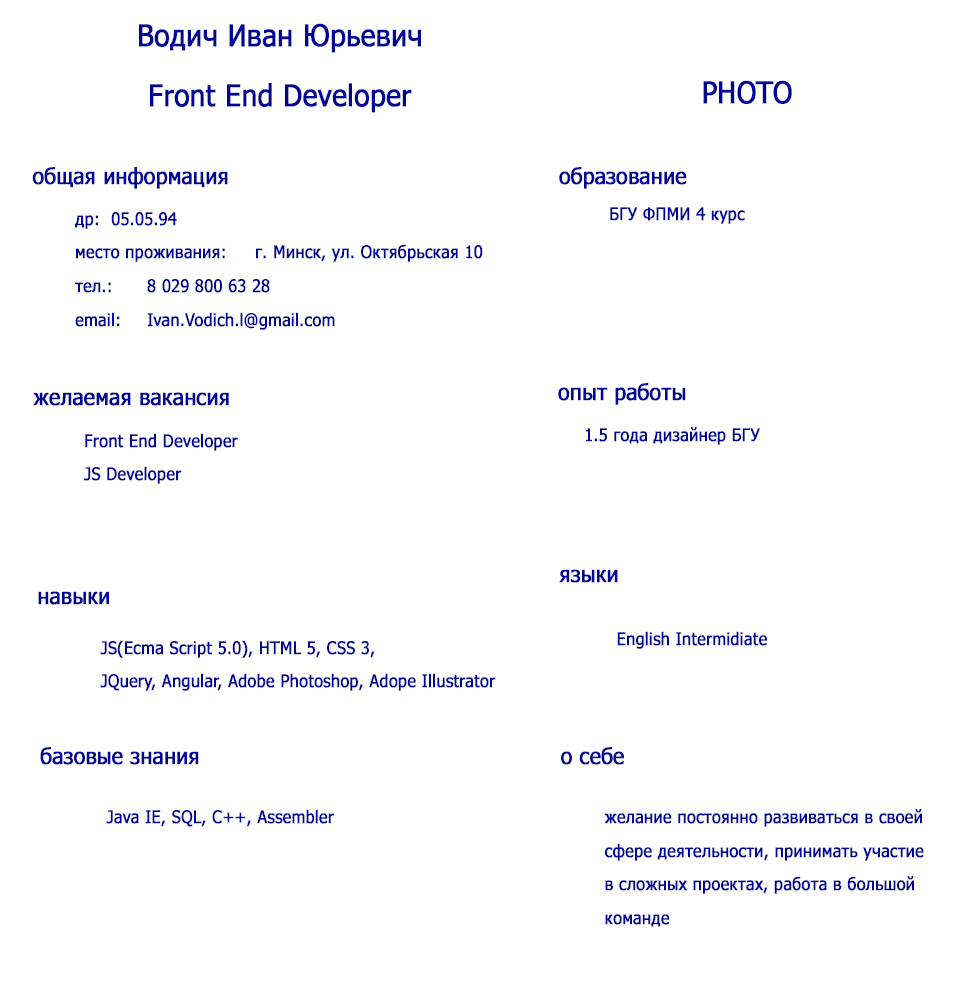
<style>
.page{position:relative;width:960px;height:1000px;background:#ffffff}
.page>*{position:absolute;margin:0}
.t1{font:30px/60px "Tahoma";color:#000596;font-weight:bold;scale:0.92 1}
.t2{font:30px "Tahoma";color:#000596;font-weight:bold;scale:0.92 1}
.t3{font:22.5px "Tahoma";color:#000596;font-weight:bold;scale:0.92 1}
.t4{font:17.5px "Tahoma";color:#000596;font-weight:bold;scale:0.92 1}
</style>
<div class="page">
<p class="t1" style="left:139px;top:23px;width:282px;height:90px;text-align:center">Водич Иван Юрьевич<br>Front End Developer</p>
<p class="t2" style="left:703px;top:80px;width:89px;height:24px">PHOTO</p>
<p class="t3" style="left:32px;top:167px;width:196px;height:22px">общая информация</p>
<p class="t3" style="left:559px;top:167px;width:128px;height:22px">образование</p>
<p class="t4" style="left:610px;top:207px;width:135px;height:17px">БГУ ФПМИ 4 курс</p>
<p class="t4" style="left:75px;top:212px;width:408px;height:118px">др: 05.05.94<br><br>место проживания: г. Минск, ул. Октябрьская 10<br><br>тел.: 8 029 800 63 28<br><br>email: Ivan.Vodich.l@gmail.com</p>
<p class="t3" style="left:558px;top:383px;width:128px;height:22px">опыт работы</p>
<p class="t3" style="left:33px;top:392px;width:196px;height:14px">желаемая вакансия</p>
<p class="t4" style="left:84px;top:433px;width:154px;height:51px">Front End Developer<br><br>JS Developer</p>
<p class="t4" style="left:586px;top:427px;width:174px;height:18px">1.5 года дизайнер БГУ</p>
<p class="t3" style="left:559px;top:569px;width:59px;height:14px">языки</p>
<p class="t3" style="left:38px;top:591px;width:71px;height:14px">навыки</p>
<p class="t4" style="left:100px;top:640px;width:396px;height:51px">JS(Ecma Script 5.0), HTML 5, CSS 3,<br><br>JQuery, Angular, Adobe Photoshop, Adope Illustrator</p>
<p class="t4" style="left:617px;top:631px;width:150px;height:18px">English Intermidiate</p>
<p class="t3" style="left:40px;top:747px;width:159px;height:18px">базовые знания</p>
<p class="t3" style="left:561px;top:747px;width:63px;height:18px">о себе</p>
<p class="t4" style="left:106px;top:809px;width:228px;height:18px">Java IE, SQL, C++, Assembler</p>
<p class="t4" style="left:604px;top:809px;width:320px;height:118px">желание постоянно развиваться в своей<br><br>сфере деятельности, принимать участие <br><br>в сложных проектах, работа в большой<br><br>команде</p>
</div>
